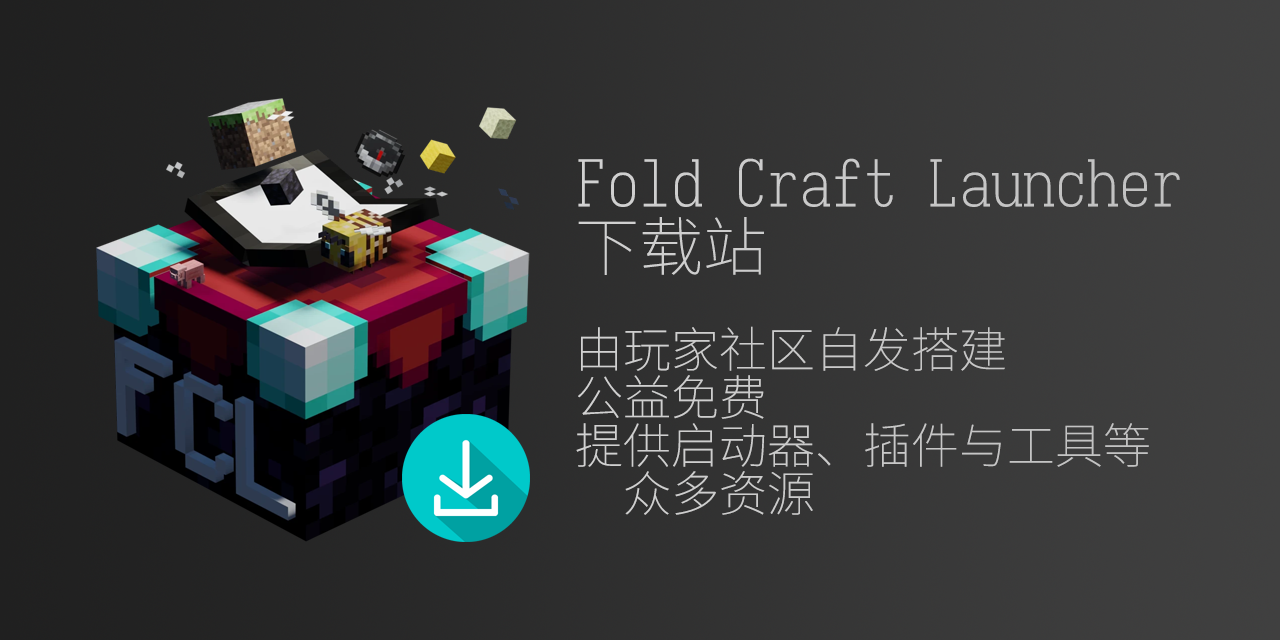
<style>
.page{position:relative;width:1280px;height:640px}
.page>*{position:absolute;margin:0}
.t1{font:64px/64px "Sarasa-Mono-Slab-SC-ExtraLight";color:#cbcbcb}
.t2{font:48px/48px "Sarasa-Mono-Slab-SC-ExtraLight";color:#cccccc}
</style>
<div class="page">
<p class="t1" style="left:578px;top:158px;width:602px;height:117px">Fold Craft Launcher<br>下载站</p>
<p class="t2" style="left:576px;top:326px;width:573px;height:189px">由玩家社区自发搭建<br>公益免费<br>提供启动器、插件与工具等<br>  众多资源</p>
</div>
